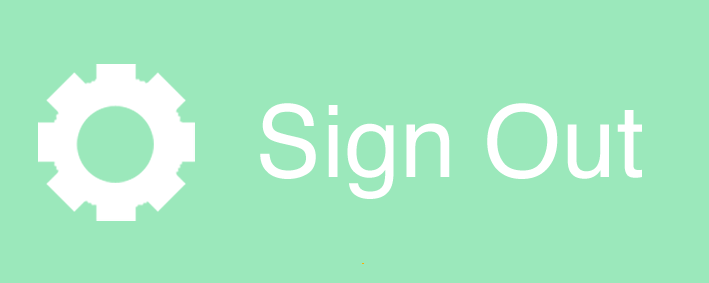
<style>
.page{position:relative;width:709px;height:283px;background:#9be8bb}
.page>*{position:absolute;margin:0}
.t1{font:100px "Helvetica";color:#ffffff}
</style>
<div class="page">
<p class="t1" style="left:260px;top:103px;width:382px;height:96px">Sign Out</p>
</div>
